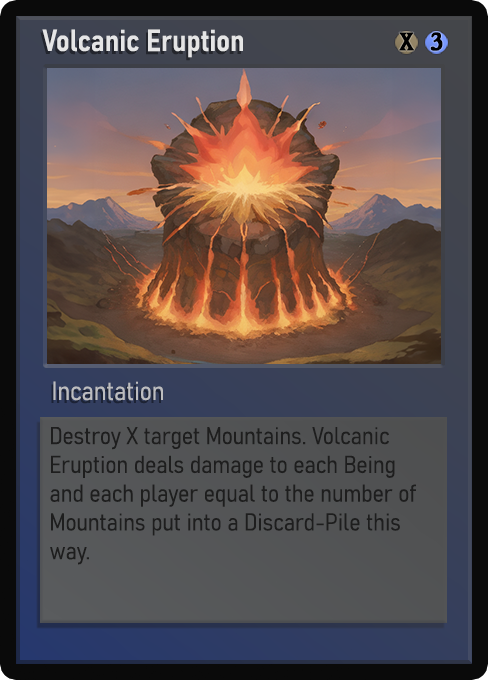
<style>
.page{position:relative;width:488px;height:680px}
.page>*{position:absolute;margin:0}
.t1{font:30px "Bahnschrift-SemiBoldSemiCondensed";color:#f2f2f2;font-weight:bold}
.t2{font:25px "WTRRoycroft";color:#000000;font-weight:bold;scale:1.09 1}
.t3{font:26px "Bahnschrift-LightSemiCondensed";color:#c8c8c8;font-weight:bold}
.t4{font:24px "Bahnschrift-LightSemiCondensed";color:#1e1e1e;font-weight:bold}
</style>
<div class="page">
<p class="t1" style="left:42px;top:29px;width:201px;height:29px;opacity:0.9">Volcanic Eruption</p>
<p class="t2" style="left:399px;top:32px;width:15px;height:19px">X</p>
<p class="t2" style="left:430px;top:32px;width:13px;height:19px">3</p>
<p class="t3" style="left:53px;top:381px;width:110px;height:20px;opacity:0.9">Incantation</p>
<p class="t4" style="left:50px;top:427px;width:366px;height:138px">Destroy X target Mountains. Volcanic Eruption deals damage to each Being and each player equal to the number of Mountains put into a Discard-Pile this way.</p>
</div>
